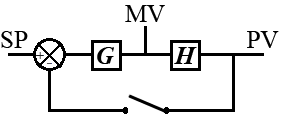
<style>
.page{position:relative;width:282px;height:121px;background:#ffffff}
.page>*{position:absolute;margin:0}
.t1{font:25px "TimesNewRomanPSMT";color:#000000}
.t2{font:25px "TimesNewRomanPS-BoldItalicMT";color:#000000}
</style>
<div class="page">
<p class="t1" style="left:125px;top:5px;width:40px;height:17px">MV</p>
<p class="t1" style="left:1px;top:31px;width:27px;height:17px">SP</p>
<p class="t1" style="left:247px;top:31px;width:32px;height:17px">PV</p>
<p class="t2" style="left:97px;top:47px;width:17px;height:17px">G</p>
<p class="t2" style="left:174px;top:47px;width:23px;height:17px">H</p>
</div>
